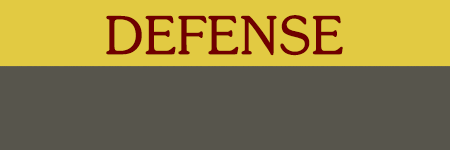
<style>
.page{position:relative;width:450px;height:150px;background:#57554c}
.page>*{position:absolute;margin:0}
.t1{font:83.3px "JasmineUPC";letter-spacing:-0.01em;color:#700000;font-weight:bold}
</style>
<div class="page">
<p class="t1" style="left:106px;top:15px;width:237px;height:41px">DEFENSE</p>
</div>
